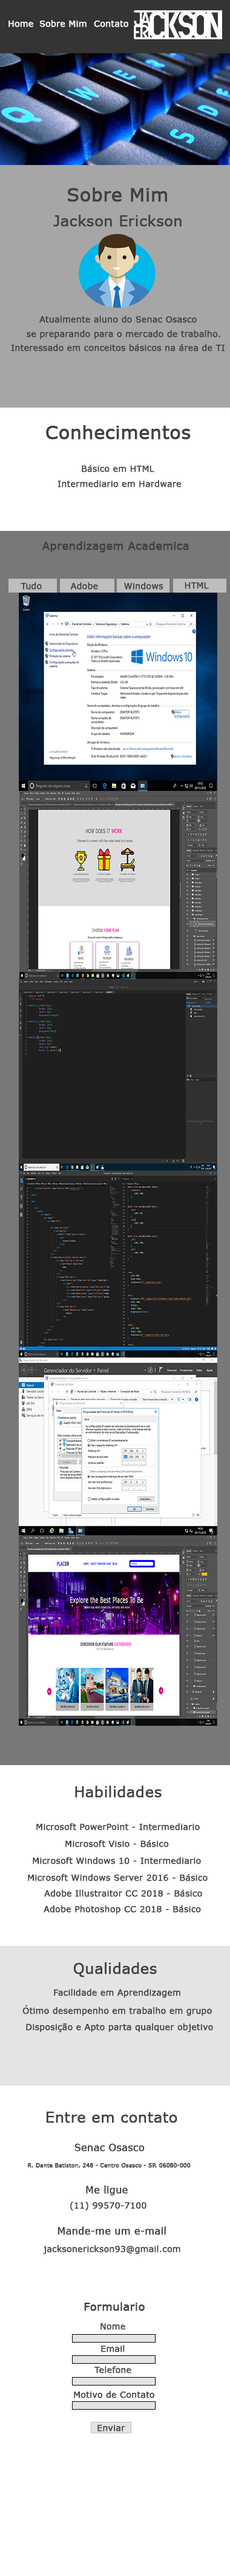
<style>
.page{position:relative;width:230px;height:2576px;background:#ffffff}
.page>*{position:absolute;margin:0}
.t1{font:8.5px "Verdana";color:#ffffff;font-weight:bold}
.t2{font:18.1px "Verdana";color:#404040;font-weight:bold}
.t3{font:14.5px "Verdana";color:#404040;font-weight:bold}
.t4{font:8.5px "Verdana";color:#404040;font-weight:bold}
.t5{font:10.9px "Verdana";color:#404040;font-weight:bold}
.t6{font:9.7px "Verdana";color:#404040;font-weight:bold}
.t7{font:5.4px "Verdana";color:#404040;font-weight:bold}
</style>
<div class="page">
<p class="t1" style="left:8px;top:21px;width:25px;height:6px">Home</p>
<p class="t1" style="left:39px;top:20px;width:47px;height:7px">Sobre Mim</p>
<p class="t1" style="left:94px;top:21px;width:34px;height:6px">Contato</p>
<p class="t2" style="left:68px;top:187px;width:99px;height:15px">Sobre Mim</p>
<p class="t3" style="left:53px;top:215px;width:128px;height:12px">Jackson Erickson</p>
<p class="t4" style="left:39px;top:316px;width:158px;height:7px">Atualmente aluno do Senac Osasco</p>
<p class="t4" style="left:27px;top:330px;width:193px;height:9px">se preparando para o mercado de trabalho.</p>
<p class="t4" style="left:11px;top:344px;width:213px;height:7px">Interessado em conceitos básicos na área de TI</p>
<p class="t2" style="left:46px;top:425px;width:144px;height:15px">Conhecimentos</p>
<p class="t4" style="left:82px;top:465px;width:72px;height:7px">Básico em HTML</p>
<p class="t4" style="left:57px;top:480px;width:124px;height:7px">Intermediario em Hardware</p>
<p class="t5" style="left:42px;top:541px;width:147px;height:12px">Aprendizagem Academica</p>
<p class="t4" style="left:21px;top:582px;width:21px;height:8px">Tudo</p>
<p class="t4" style="left:70px;top:582px;width:28px;height:8px">Adobe</p>
<p class="t4" style="left:124px;top:582px;width:39px;height:8px">Windows</p>
<p class="t4" style="left:184px;top:582px;width:25px;height:7px">HTML</p>
<p class="t3" style="left:75px;top:1786px;width:86px;height:12px">Habilidades</p>
<p class="t4" style="left:36px;top:1823px;width:164px;height:7px">Microsoft PowerPoint - Intermediario</p>
<p class="t4" style="left:65px;top:1840px;width:104px;height:7px">Microsoft Visio - Básico</p>
<p class="t4" style="left:33px;top:1857px;width:168px;height:7px">Microsoft Windows 10 - Intermediario</p>
<p class="t4" style="left:28px;top:1874px;width:179px;height:7px">Microsoft Windows Server 2016 - Básico</p>
<p class="t4" style="left:44px;top:1890px;width:158px;height:7px">Adobe Illustraitor CC 2018 - Básico</p>
<p class="t4" style="left:44px;top:1905px;width:157px;height:9px">Adobe Photoshop CC 2018 - Básico</p>
<p class="t3" style="left:73px;top:1962px;width:84px;height:15px">Qualidades</p>
<p class="t4" style="left:54px;top:1989px;width:126px;height:9px">Facilidade em Aprendizagem</p>
<p class="t4" style="left:22px;top:2005px;width:190px;height:11px">Ótimo desempenho em trabalho em grupo</p>
<p class="t4" style="left:26px;top:2023px;width:187px;height:9px">Disposição e Apto parta qualquer objetivo</p>
<p class="t3" style="left:46px;top:2112px;width:131px;height:11px">Entre em contato</p>
<p class="t6" style="left:74px;top:2144px;width:71px;height:8px">Senac Osasco</p>
<p class="t7" style="left:28px;top:2163px;width:162px;height:5px">R. Dante Batiston, 248 - Centro Osasco - SP, 06080-000</p>
<p class="t6" style="left:86px;top:2185px;width:42px;height:11px">Me ligue</p>
<p class="t4" style="left:70px;top:2202px;width:76px;height:9px">(11) 99570-7100</p>
<p class="t6" style="left:57px;top:2226px;width:109px;height:9px">Mande-me um e-mail</p>
<p class="t4" style="left:43px;top:2245px;width:137px;height:9px">jacksonerickson93@gmail.com</p>
<p class="t5" style="left:84px;top:2302px;width:61px;height:9px">Formulario</p>
<p class="t4" style="left:100px;top:2323px;width:25px;height:7px">Nome</p>
<p class="t4" style="left:101px;top:2345px;width:24px;height:7px">Email</p>
<p class="t4" style="left:94px;top:2366px;width:37px;height:7px">Telefone</p>
<p class="t4" style="left:74px;top:2391px;width:80px;height:7px">Motivo de Contato</p>
<p class="t4" style="left:97px;top:2425px;width:28px;height:6px">Enviar</p>
</div>
